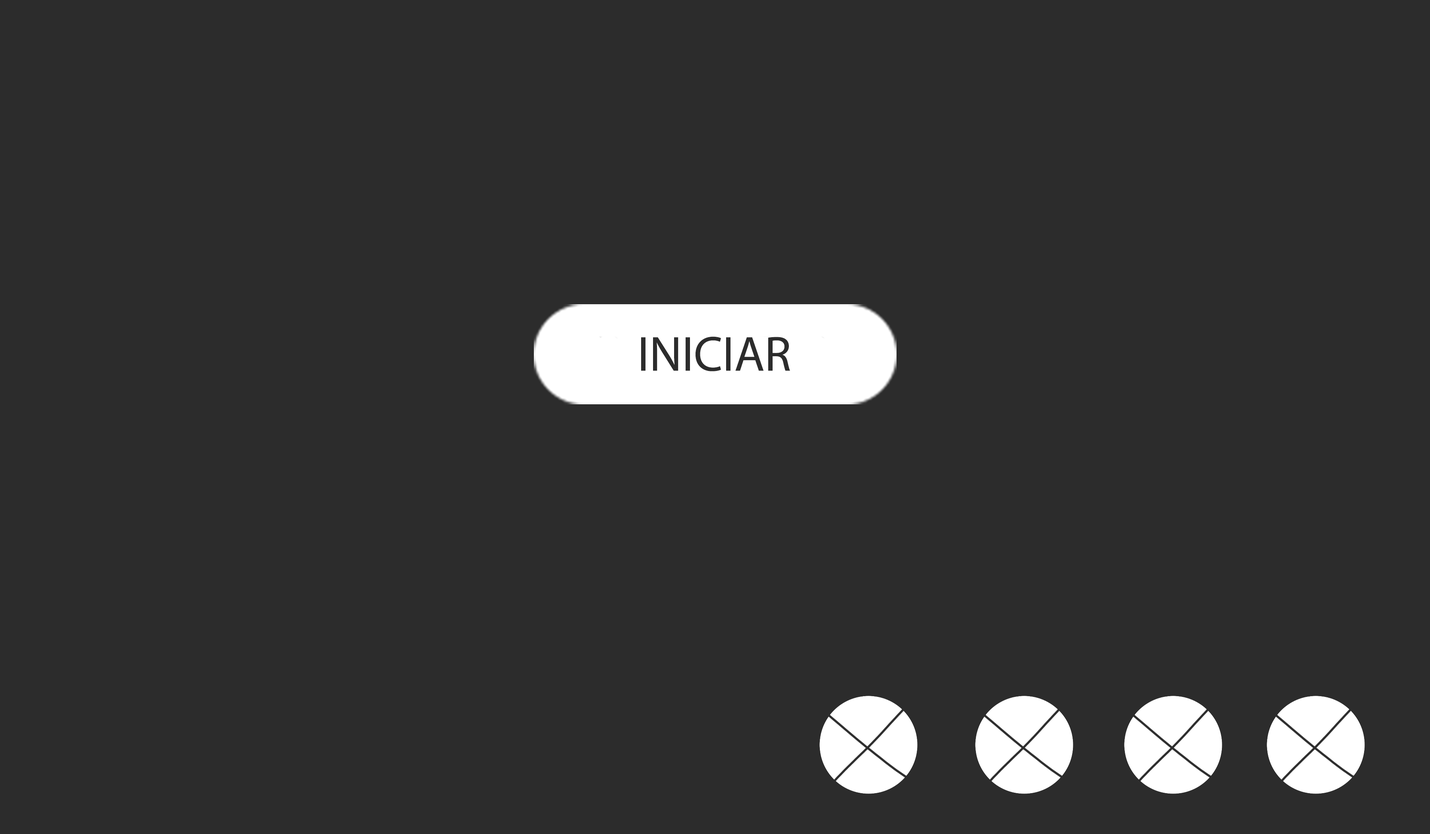
<style>
.page{position:relative;width:1430px;height:834px;background:#2c2c2c}
.page>*{position:absolute;margin:0}
.t1{font:49.6px "MyriadPro-Regular";color:#2c2c2c}
</style>
<div class="page">
<p class="t1" style="left:641px;top:336px;width:149px;height:35px">INICIAR</p>
</div>
